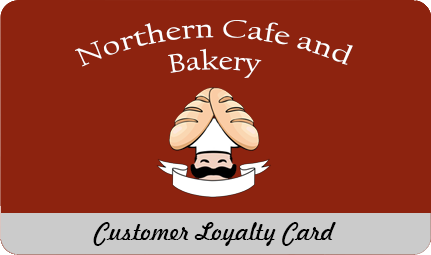
<style>
.page{position:relative;width:431px;height:255px;background:#8d230f}
.page>*{position:absolute;margin:0}
.t1{font:26.8px "CalifornianFB-Reg";color:#ffffff}
.t2{font:24px "Freehand521BT-RegularC";color:#000000}
</style>
<div class="page">
<p class="t1" style="left:75px;top:20px;width:278px;height:58px;text-align:center">Northern Cafe and Bakery</p>
<p class="t2" style="left:93px;top:222px;width:243px;height:24px">Customer Loyalty Card</p>
</div>
